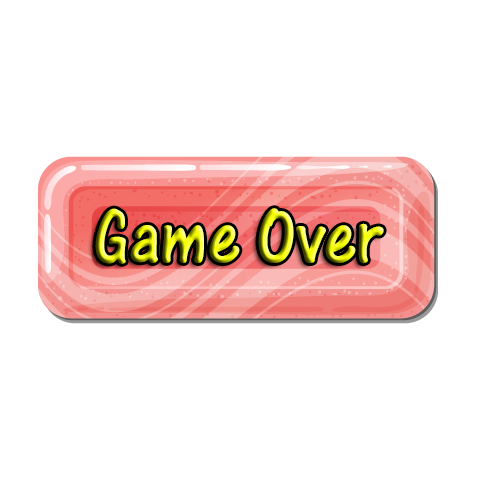
<style>
.page{position:relative;width:480px;height:480px;background:#ffffff}
.page>*{position:absolute;margin:0}
.t1{font:79.5px "OneStrokeScriptLetPlain"}
</style>
<div class="page">
<p class="t1" style="left:95px;top:208px;width:289px;height:56px">Game Over</p>
</div>
